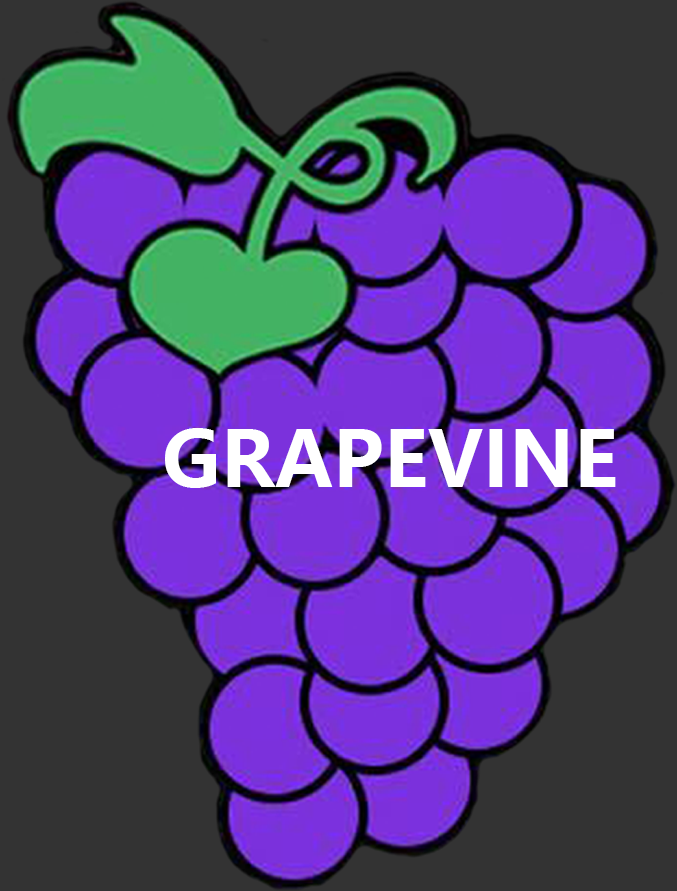
<style>
.page{position:relative;width:677px;height:891px;background:#333333}
.page>*{position:absolute;margin:0}
.t1{font:77px "MicrosoftYaHei-Bold";color:#ffffff}
</style>
<div class="page">
<p class="t1" style="left:165px;top:428px;width:451px;height:60px">GRAPEVINE</p>
</div>
